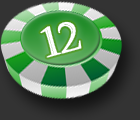
<style>
.page{position:relative;width:140px;height:120px}
.page>*{position:absolute;margin:0}
.t1{font:40px "Castellar";color:#ffffff;font-weight:bold}
</style>
<div class="page">
<p class="t1" style="left:40px;top:21px;width:42px;height:37px;rotate:-16deg">12</p>
</div>
